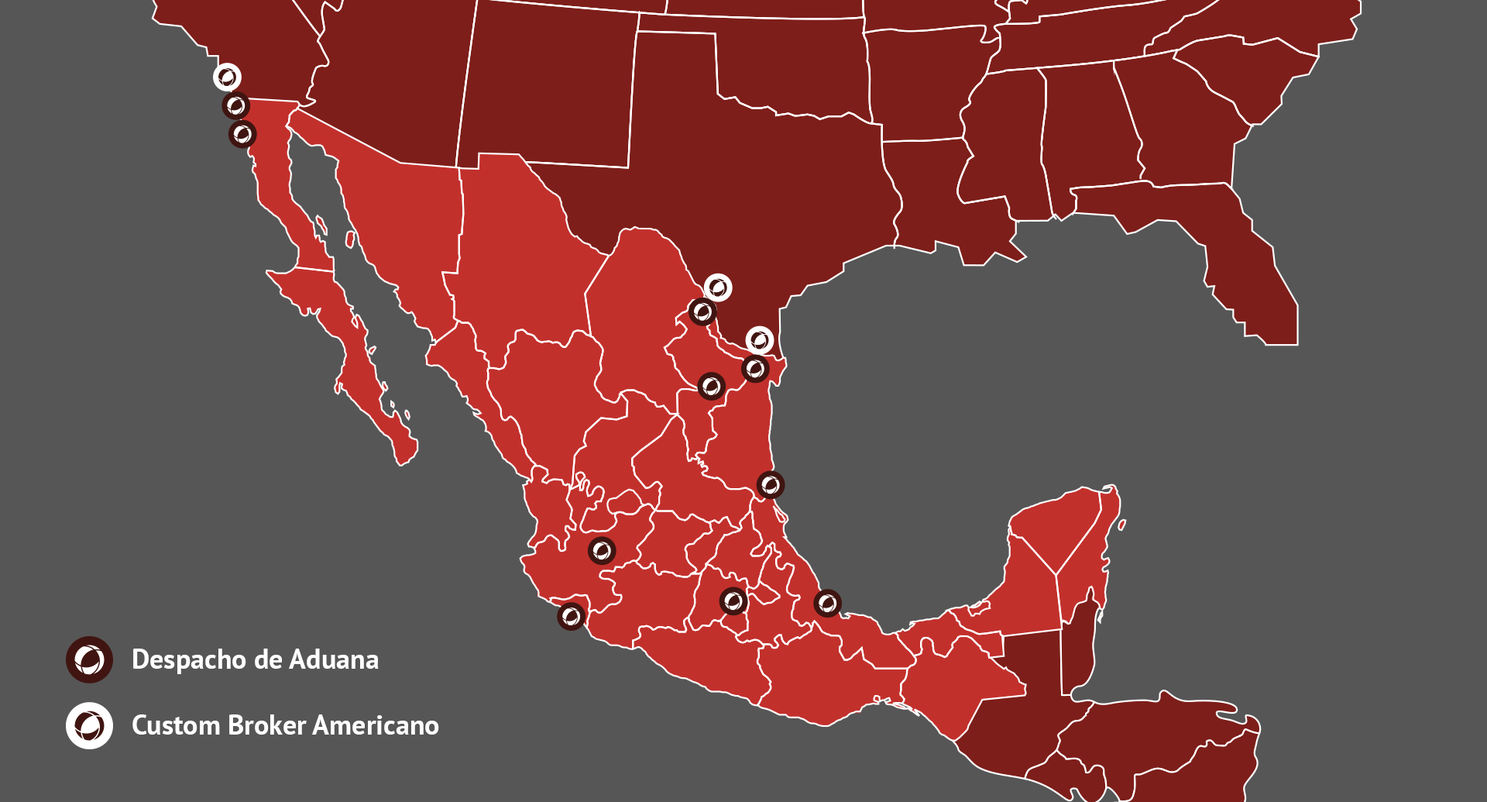
<style>
.page{position:relative;width:1487px;height:802px;background:#565656}
.page>*{position:absolute;margin:0}
.t1{font:28px "PTSans-Bold";color:#ffffff}
</style>
<div class="page">
<p class="t1" style="left:133px;top:648px;width:246px;height:26px">Despacho de Aduana</p>
<p class="t1" style="left:132px;top:714px;width:307px;height:20px">Custom Broker Americano</p>
</div>
